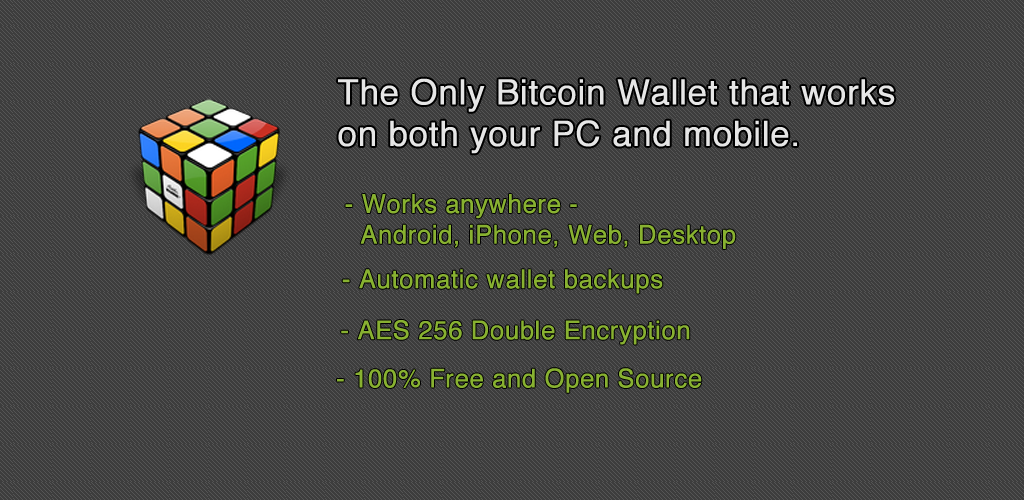
<style>
.page{position:relative;width:1024px;height:500px;background:#3d3d3d}
.page>*{position:absolute;margin:0}
.t1{font:34.6px "Helvetica";color:#e6e6e6;font-weight:bold}
.t2{font:25.5px "Helvetica";color:#88b131;font-weight:bold}
</style>
<div class="page">
<p class="t1" style="left:338px;top:78px;width:557px;height:76px">The Only Bitcoin Wallet that works <br>on both your PC and mobile.</p>
<p class="t2" style="left:345px;top:194px;width:391px;height:55px">- Works anywhere - <br>  Android, iPhone, Web, Desktop</p>
<p class="t2" style="left:342px;top:269px;width:321px;height:25px">- Automatic wallet backups</p>
<p class="t2" style="left:341px;top:320px;width:349px;height:25px">- AES 256 Double Encryption</p>
<p class="t2" style="left:337px;top:368px;width:365px;height:25px">- 100% Free and Open Source</p>
</div>
